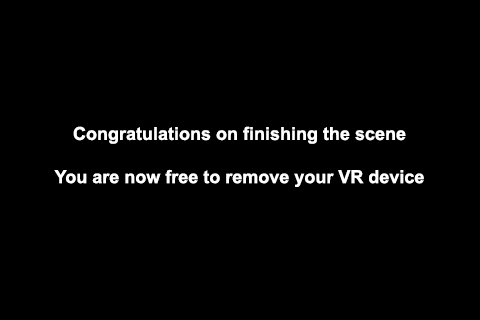
<style>
.page{position:relative;width:480px;height:320px;background:#000000}
.page>*{position:absolute;margin:0}
.t1{font:18px "Arial-BoldMT";color:#ffffff}
</style>
<div class="page">
<p class="t1" style="left:54px;top:126px;width:370px;height:61px;text-align:center">Congratulations on finishing the scene<br><br>You are now free to remove your VR device</p>
</div>
